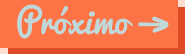
<style>
.page{position:relative;width:185px;height:54px;background:#fc7345}
.page>*{position:absolute;margin:0}
.t1{font:33.3px "Pacifico-Regular";color:#bfd9da}
</style>
<div class="page">
<p class="t1" style="left:17px;top:4px;width:152px;height:35px">Próximo -&gt;</p>
</div>
